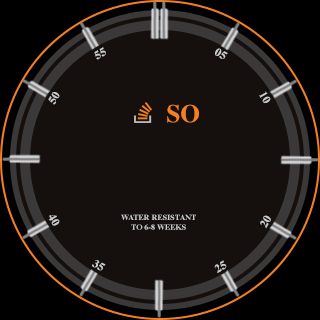
<style>
.page{position:relative;width:320px;height:320px;background:#15100d}
.page>*{position:absolute;margin:0}
.t1{font:12px "Times-Bold";color:#cbcccd}
.t2{font:25px "Times-Bold";color:#f48024}
.t3{font:8px "Times-Bold";color:#cbcccd}
</style>
<div class="page">
<p class="t1" style="left:94px;top:47px;width:12px;height:13px;rotate:-30deg">55</p>
<p class="t1" style="left:215px;top:48px;width:13px;height:11px;rotate:30deg">05</p>
<p class="t1" style="left:48px;top:92px;width:12px;height:13px;rotate:-60deg">50</p>
<p class="t1" style="left:259px;top:91px;width:12px;height:12px;rotate:60deg">10</p>
<p class="t2" style="left:167px;top:104px;width:32px;height:19px">SO</p>
<p class="t1" style="left:49px;top:215px;width:11px;height:11px;rotate:60deg">40</p>
<p class="t3" style="left:121px;top:214px;width:75px;height:16px;text-align:center">WATER RESISTANT<br>TO 6-8 WEEKS</p>
<p class="t1" style="left:260px;top:215px;width:11px;height:14px;rotate:-60deg">20</p>
<p class="t1" style="left:92px;top:260px;width:14px;height:11px;rotate:30deg">35</p>
<p class="t1" style="left:214px;top:260px;width:13px;height:13px;rotate:-30deg">25</p>
</div>
